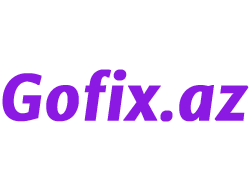
<style>
.page{position:relative;width:250px;height:190px;background:#ffffff}
.page>*{position:absolute;margin:0}
.t1{font:62px "MerriweatherSans-BoldItalic";color:#8b18e3;font-weight:bold}
</style>
<div class="page">
<p class="t1" style="left:2px;top:69px;width:247px;height:53px">Gofix.az</p>
</div>
